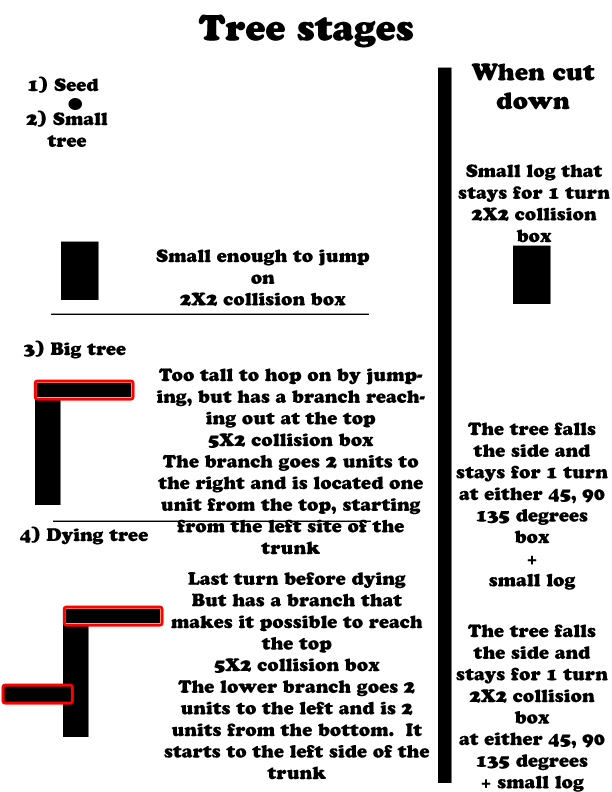
<style>
.page{position:relative;width:612px;height:792px;background:#ffffff}
.page>*{position:absolute;margin:0}
.t1{font:36px "CooperBlackStd";color:#000000}
.t2{font:24px "CooperBlackStd";color:#000000}
.t3{font:18px "CooperBlackStd";color:#000000}
</style>
<div class="page">
<p class="t1" style="left:198px;top:14px;width:215px;height:34px">Tree stages</p>
<p class="t2" style="left:471px;top:63px;width:124px;height:47px;text-align:center">When cut <br>down</p>
<p class="t3" style="left:28px;top:76px;width:71px;height:17px">1) Seed</p>
<p class="t3" style="left:26px;top:110px;width:82px;height:37px;text-align:center">2) Small<br>tree</p>
<p class="t3" style="left:458px;top:164px;width:152px;height:79px;text-align:center">Small log that<br>stays for 1 turn<br>2X2 collision <br>box</p>
<p class="t3" style="left:156px;top:249px;width:214px;height:58px;text-align:center">Small enough to jump on<br>2X2 collision box</p>
<p class="t3" style="left:23px;top:340px;width:103px;height:19px">3) Big tree</p>
<p class="t3" style="left:156px;top:368px;width:269px;height:187px;text-align:center">Too tall to hop on by jumping, but has a branch reaching out at the top<br>5X2 collision box<br>The branch goes 2 units to the right and is located one unit from the top, starting from the left site of the trunk</p>
<p class="t3" style="left:456px;top:422px;width:152px;height:168px;text-align:center">The tree falls <br>the side and<br>stays for 1 turn<br>at either 45, 90<br>135 degrees<br>box<br>+<br>small log</p>
<p class="t3" style="left:20px;top:526px;width:128px;height:19px">4) Dying tree</p>
<p class="t3" style="left:164px;top:572px;width:266px;height:208px;text-align:center">Last turn before dying<br>But has a branch that makes it possible to reach the top<br>5X2 collision box<br>The lower branch goes 2 units to the left and is 2 units from the bottom.  It starts to the left side of the trunk</p>
<p class="t3" style="left:456px;top:624px;width:152px;height:168px;text-align:center">The tree falls <br>the side and<br>stays for 1 turn<br>2X2 collision<br>box<br>at either 45, 90<br>135 degrees<br>+ small log<br>+<br>small log</p>
</div>
